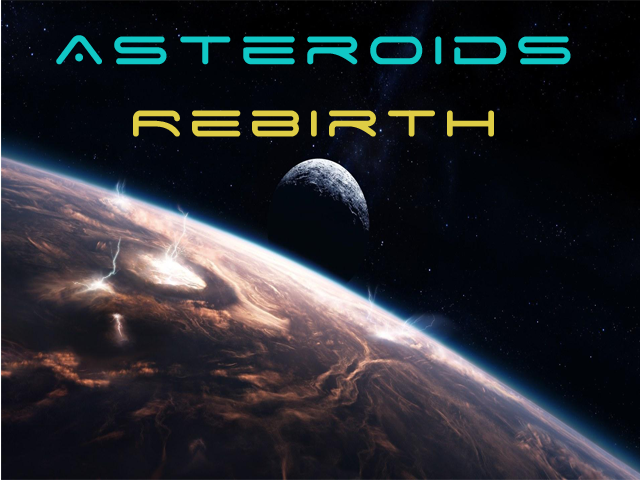
<style>
.page{position:relative;width:640px;height:480px}
.page>*{position:absolute;margin:0}
.t1{font:64px "SpaceAge";letter-spacing:0.1em;color:#10c8c6}
.t2{font:60px "SpaceAge";letter-spacing:0.1em;color:#decd45}
</style>
<div class="page">
<p class="t1" style="left:56px;top:35px;width:515px;height:102px;text-align:center">Asteroids<br><span class="t2">Rebirth</span></p>
</div>
